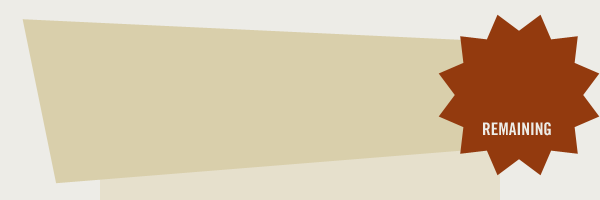
<style>
.page{position:relative;width:600px;height:200px;background:#d9cfab}
.page>*{position:absolute;margin:0}
.t1{font:17.2px "TradeGothicLT-BoldCondTwenty";color:#edece7;text-transform:uppercase}
</style>
<div class="page">
<p class="t1" style="left:483px;top:122px;width:68px;height:14px">remaining</p>
</div>
